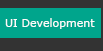
<style>
.page{position:relative;width:103px;height:51px;background:#00a58c}
.page>*{position:absolute;margin:0}
.t1{font:11px "Verdana";color:#fcfcfc}
</style>
<div class="page">
<p class="t1" style="left:5px;top:18px;width:90px;height:11px">UI Development</p>
</div>
